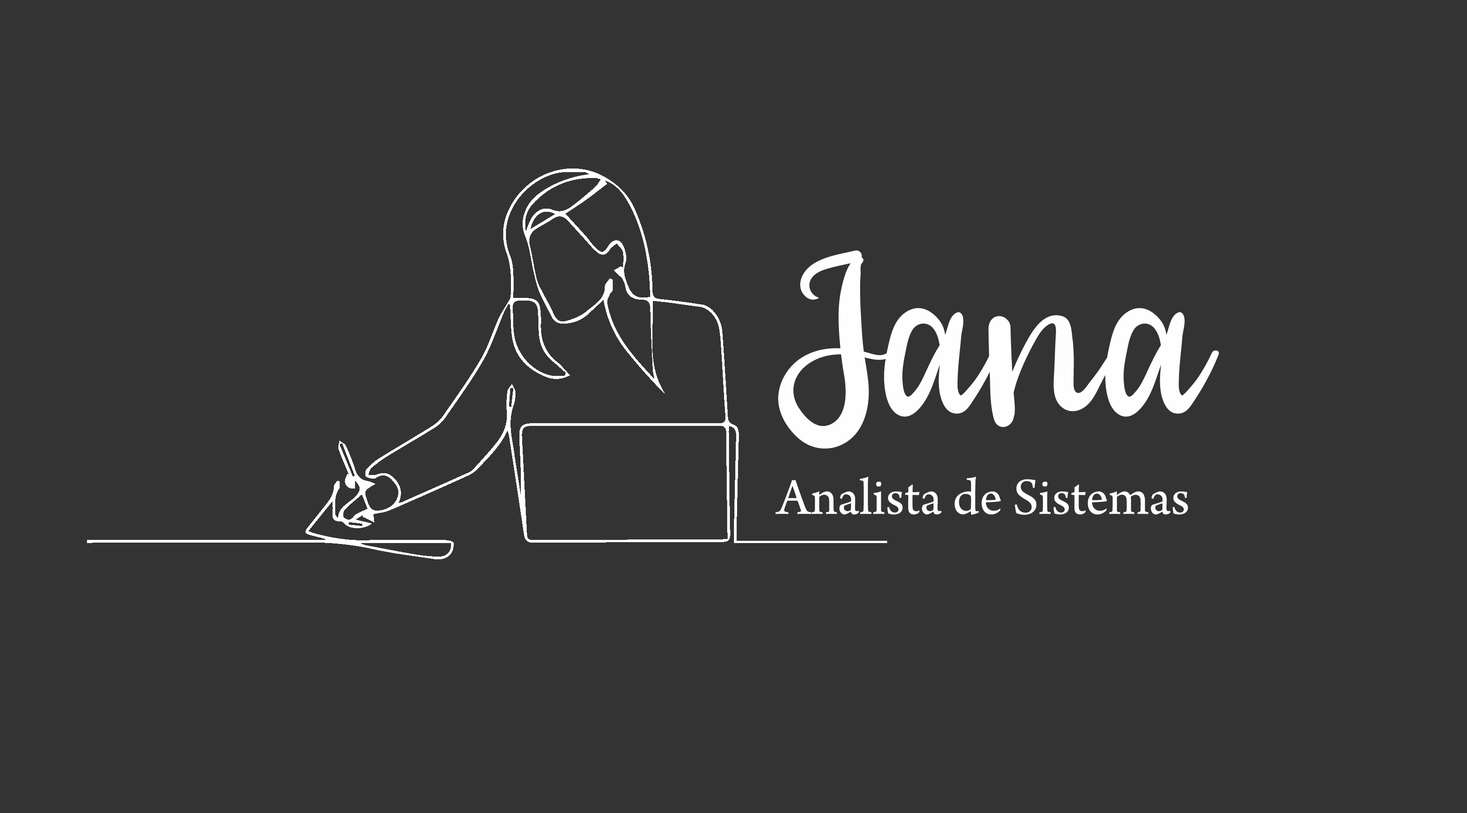
<style>
.page{position:relative;width:1467px;height:813px;background:#333333}
.page>*{position:absolute;margin:0}
.t1{font:229px "WeddingRegular";color:#fefefe}
.t2{font:54.4px "ArnoPro-Regular";color:#fefefe}
</style>
<div class="page">
<p class="t1" style="left:778px;top:250px;width:441px;height:199px">Jana</p>
<p class="t2" style="left:775px;top:477px;width:413px;height:38px">Analista de Sistemas</p>
</div>
